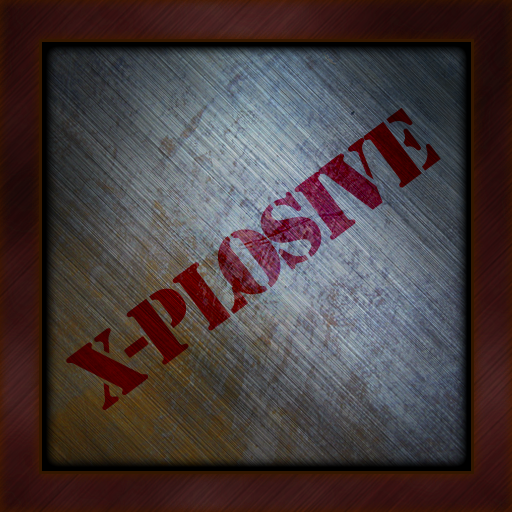
<style>
.page{position:relative;width:512px;height:512px}
.page>*{position:absolute;margin:0}
.t1{font:96.7px "Stencil";letter-spacing:-0.05em}
</style>
<div class="page">
<p class="t1" style="left:66px;top:107px;width:375px;height:303px;rotate:-37deg">X-Plosive</p>
</div>
